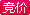
<style>
.page{position:relative;width:30px;height:15px;background:#e7003c}
.page>*{position:absolute;margin:0}
.t1{font:12px "MicrosoftYaHei";color:#ffffff}
</style>
<div class="page">
<p class="t1" style="left:3px;top:2px;width:24px;height:11px">竞价</p>
</div>
